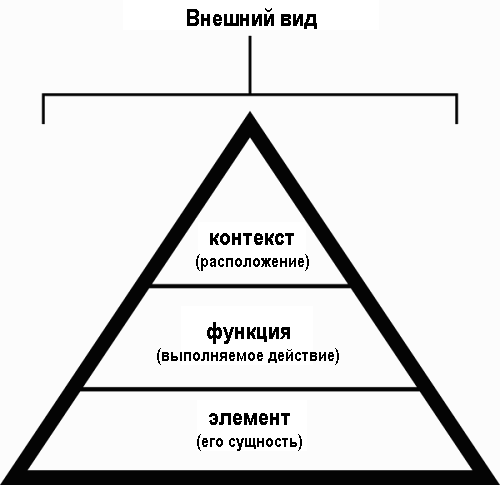
<style>
.page{position:relative;width:500px;height:485px;background:#fcfcfc}
.page>*{position:absolute;margin:0}
.t1{font:24px "ArialNarrow-Bold";color:#000000}
.t2{font:18px "ArialNarrow-Bold";color:#000000}
</style>
<div class="page">
<p class="t1" style="left:187px;top:8px;width:130px;height:21px">Внешний вид</p>
<p class="t2" style="left:196px;top:233px;width:113px;height:38px;text-align:center"><span class="t1">контекст<br></span>(расположение)</p>
<p class="t2" style="left:157px;top:322px;width:182px;height:43px;text-align:center"><span class="t1">функция<br></span>(выполняемое действие)</p>
<p class="t2" style="left:197px;top:413px;width:105px;height:38px;text-align:center"><span class="t1">элемент<br></span>(его сущность)</p>
</div>
